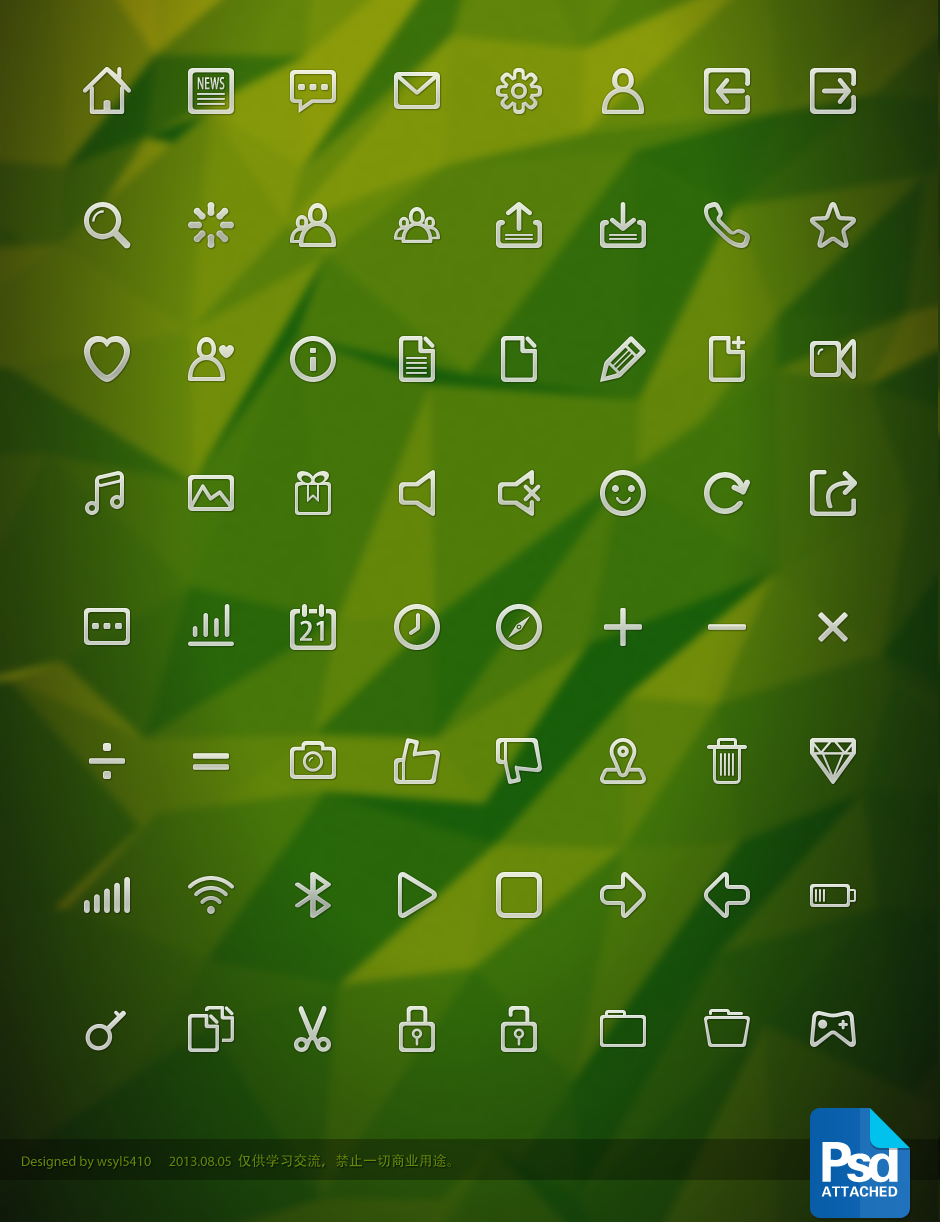
<style>
.page{position:relative;width:940px;height:1222px}
.page>*{position:absolute;margin:0}
.t1{font:15.5px "AdobeHeitiStd-Regular";color:#d6dbd1;text-transform:uppercase;font-weight:bold;scale:0.64 1}
.t2{font:25.8px "AdobeHeitiStd-Regular";color:#d3dacf;font-weight:bold}
.t3{font:55px "FZZYJW--GB1-0";letter-spacing:-0.12em;color:#ffffff}
.t4{font:14px "MyriadPro-Regular";color:#64870a}
.t5{font:14px "AdobeHeitiStd-Regular";color:#64870a}
.t6{font:14px "FZZYJW--GB1-0";letter-spacing:0.01em;color:#ffffff}
</style>
<div class="page">
<p class="t1" style="left:197px;top:77px;width:28px;height:13px">news</p>
<p class="t2" style="left:300px;top:620px;width:24px;height:21px">21</p>
<p class="t3" style="left:822px;top:1142px;width:76px;height:41px">Psd</p>
<p class="t4" style="left:22px;top:1154px;width:429px;height:15px">Designed by wsyl5410      2013.08.05  <span class="t5">仅供学习交流，禁止一切商业用途。</span></p>
<p class="t6" style="left:821px;top:1186px;width:77px;height:11px">ATTACHED</p>
</div>
